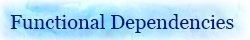
<style>
.page{position:relative;width:250px;height:40px}
.page>*{position:absolute;margin:0}
.t1{font:20px "Georgia";color:#061584}
</style>
<div class="page">
<p class="t1" style="left:10px;top:14px;width:224px;height:19px">Functional Dependencies</p>
</div>
